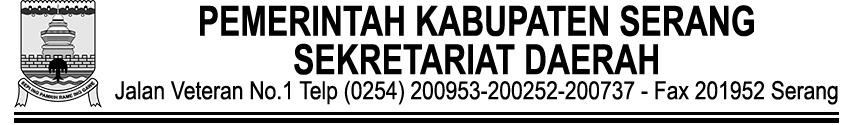
<style>
.page{position:relative;width:850px;height:125px;background:#ffffff}
.page>*{position:absolute;margin:0}
.t1{font:25px/25px "ArialMT";color:#000000;scale:0.84 1}
.t2{font:41.7px/6.9px "Arial-BoldMT";color:#000000;scale:0.77 1}
.t3{font:41.7px/38.4px "Arial-BoldMT";color:#000000;scale:0.77 1}
</style>
<div class="page">
<p class="t1" style="left:115px;top:5px;width:723px;height:100px;text-align:center"><span class="t2">PEMERINTAH KABUPATEN SERANG</span><span class="t3"><br>SEKRETARIAT DAERAH<br></span>Jalan Veteran No.1 Telp (0254) 200953-200252-200737 - Fax 201952 Serang</p>
</div>
